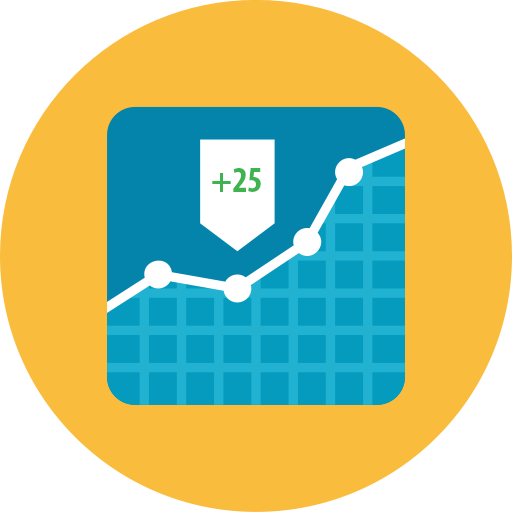
<style>
.page{position:relative;width:512px;height:512px;background:#fabc3d}
.page>*{position:absolute;margin:0}
.t1{font:36px "MyriadPro-BoldCond";color:#3fb34f}
</style>
<div class="page">
<p class="t1" style="left:212px;top:168px;width:49px;height:24px">+25</p>
</div>
